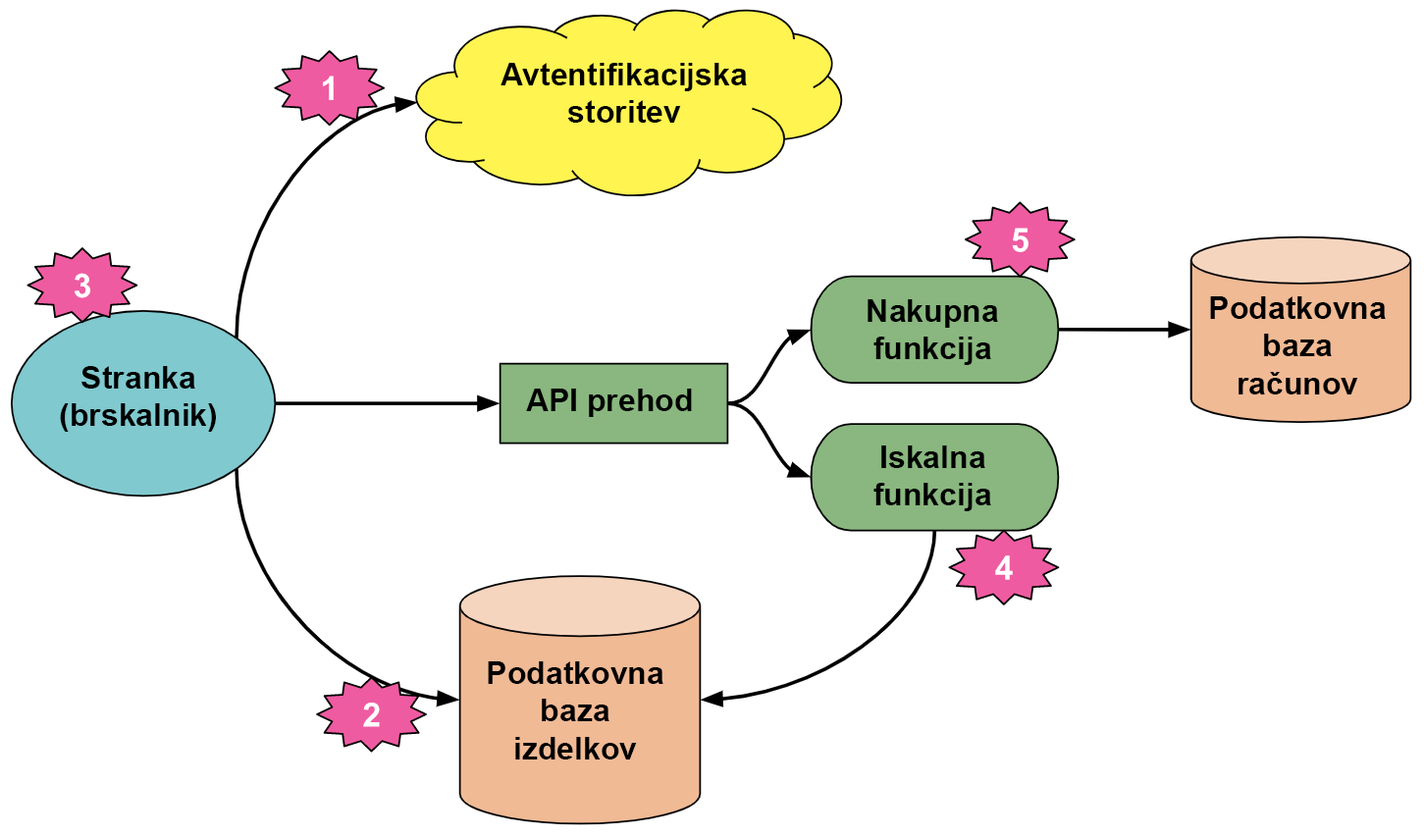
<style>
.page{position:relative;width:1424px;height:837px;background:#ffffff}
.page>*{position:absolute;margin:0}
.t1{font:31.4px "Arial-BoldMT";color:#000000}
</style>
<div class="page">
<p class="t1" style="left:501px;top:63px;width:246px;height:60px;text-align:center">Avtentifikacijska<br>storitev</p>
<p class="t1" style="left:868px;top:299px;width:130px;height:66px;text-align:center">Nakupna<br>funkcija</p>
<p class="t1" style="left:1210px;top:296px;width:176px;height:99px;text-align:center">Podatkovna<br>baza<br>računov</p>
<p class="t1" style="left:60px;top:366px;width:156px;height:66px;text-align:center">Stranka<br>(brskalnik)</p>
<p class="t1" style="left:526px;top:389px;width:166px;height:28px">API prehod</p>
<p class="t1" style="left:874px;top:446px;width:117px;height:65px;text-align:center">Iskalna<br>funkcija</p>
<p class="t1" style="left:488px;top:662px;width:176px;height:98px;text-align:center">Podatkovna<br>baza<br>izdelkov</p>
</div>
